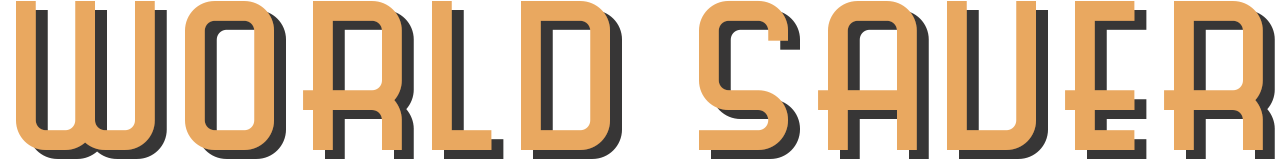
<style>
.page{position:relative;width:1280px;height:160px;background:#ffffff}
.page>*{position:absolute;margin:0}
.t1{font:198.2px "ScienceFair";letter-spacing:0.05em;color:#e9a860}
</style>
<div class="page">
<p class="t1" style="left:16px;top:0px;width:1247px;height:150px">WORLD SAVER</p>
</div>
